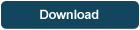
<style>
.page{position:relative;width:140px;height:30px;background:#12465e}
.page>*{position:absolute;margin:0}
.t1{font:13px "Arial-BoldMT";letter-spacing:-0.025em;color:#ffffff}
</style>
<div class="page">
<p class="t1" style="left:40px;top:9px;width:59px;height:10px">Download</p>
</div>
